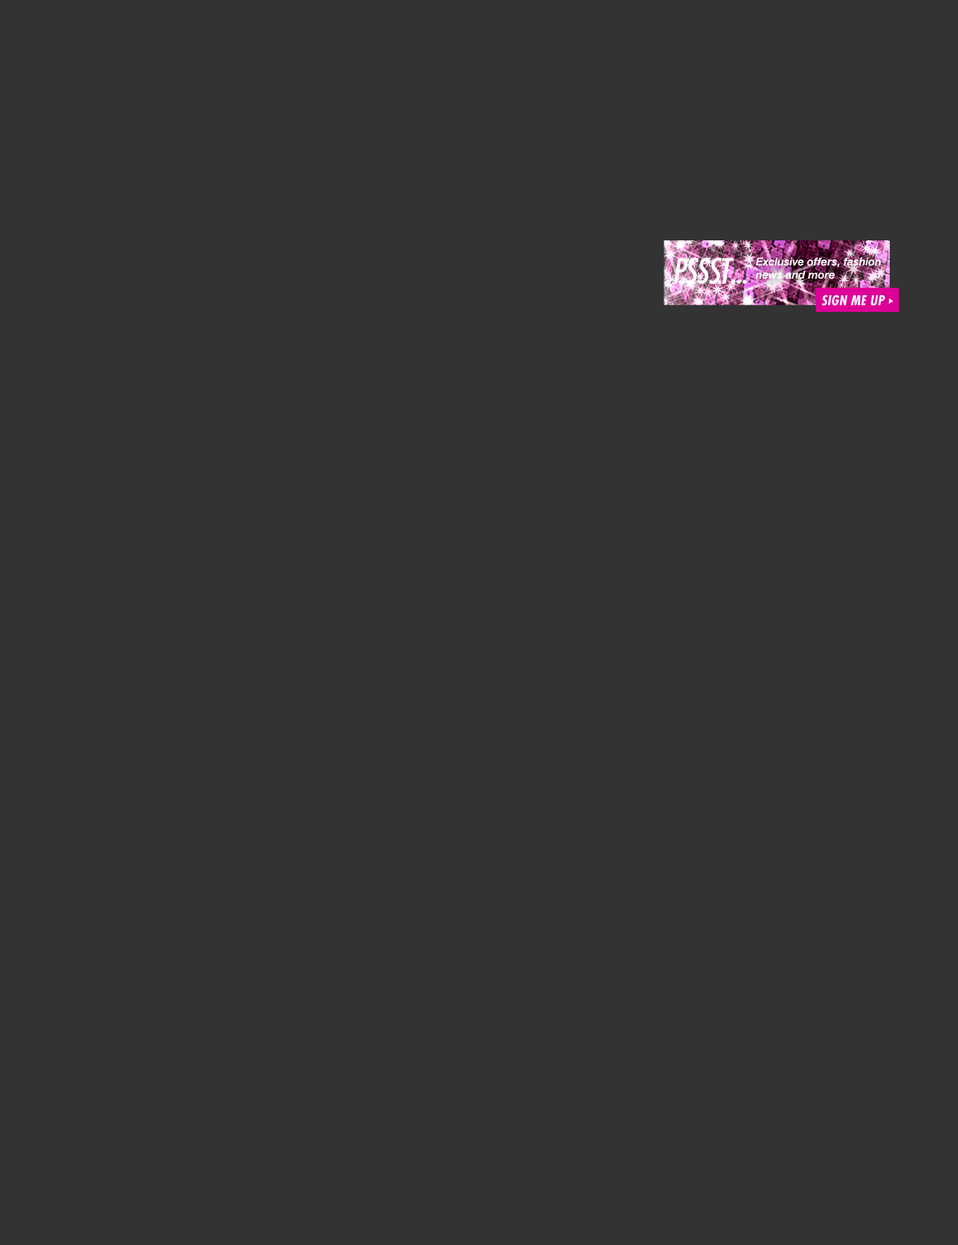
<style>
.page{position:relative;width:958px;height:1245px;background:#333333}
.page>*{position:absolute;margin:0}
.t1{font:33.9px "Futura-CondensedOblique";letter-spacing:0.01em;color:#ffffff;text-transform:uppercase}
.t2{font:10.9px/13.1px "HelveticaNeueLTStd-MdIt";letter-spacing:0.005em;color:#ffffff}
.t3{font:13.3px "Futura-CondensedBoldOblique";letter-spacing:0.03em;color:#ffffff}
</style>
<div class="page">
<p class="t1" style="left:674px;top:257px;width:73px;height:27px">PSSST...</p>
<p class="t2" style="left:755px;top:257px;width:126px;height:22px">Exclusive offers, fashion<br>news and more</p>
<p class="t3" style="left:822px;top:294px;width:63px;height:12px">SIGN ME UP</p>
</div>
